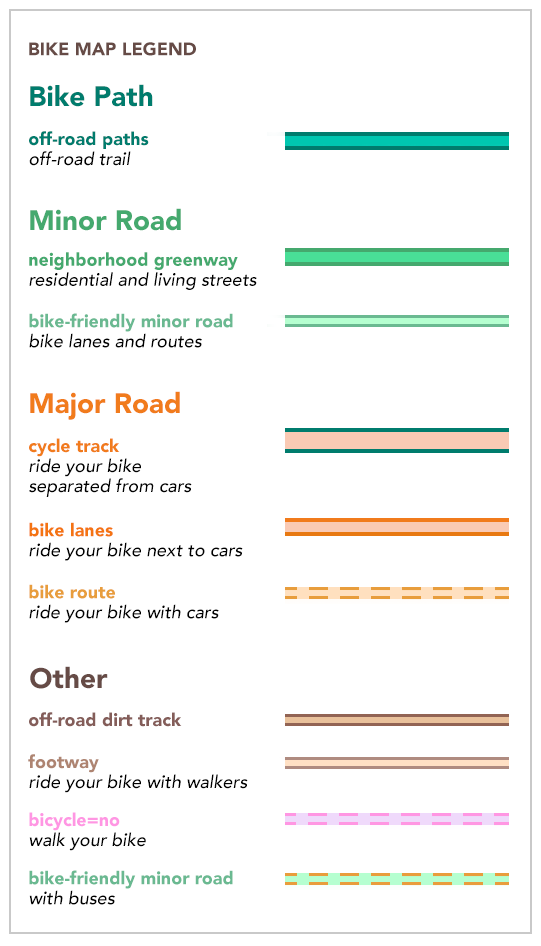
<style>
.page{position:relative;width:541px;height:946px;background:#ffffff}
.page>*{position:absolute;margin:0}
.t1{font:18px "Avenir-Black";color:#664b46;text-transform:uppercase}
.t2{font:28px "Avenir-Black";color:#007c6d}
.t3{font:18px/20px "Avenir-Black";color:#007c6d}
.t4{font:18px/20px "Avenir-MediumOblique";color:#000000}
.t5{font:28px "Avenir-Black";color:#45a96e}
.t6{font:18px/20px "Avenir-Black";color:#45a96e}
.t7{font:18px/20px "Avenir-Black";color:#6ab991}
.t8{font:28px "Avenir-Black";color:#f17b1c}
.t9{font:18px/20px "Avenir-Black";color:#f17b1c}
.t10{font:18px/20px "Avenir-Black";color:#f47412}
.t11{font:18px/20px "Avenir-Black";color:#e89d3c}
.t12{font:28px "Avenir-Black";color:#664b46}
.t13{font:18px "Avenir-Black";color:#845d59}
.t14{font:18px/20px "Avenir-Black";color:#ae8471}
.t15{font:18px/20px "Avenir-Black";color:#ff96e3}
</style>
<div class="page">
<p class="t1" style="left:29px;top:42px;width:167px;height:14px">Bike Map Legend</p>
<p class="t2" style="left:30px;top:84px;width:123px;height:23px">Bike Path</p>
<p class="t3" style="left:29px;top:131px;width:120px;height:35px">off-road paths<br><span class="t4">off-road trail</span></p>
<p class="t5" style="left:30px;top:208px;width:151px;height:23px">Minor Road</p>
<p class="t4" style="left:29px;top:252px;width:228px;height:38px"><span class="t6">neighborhood greenway<br></span>residential and living streets</p>
<p class="t7" style="left:29px;top:313px;width:204px;height:35px">bike-friendly minor road<br><span class="t4">bike lanes and routes</span></p>
<p class="t8" style="left:30px;top:391px;width:150px;height:29px">Major Road</p>
<p class="t4" style="left:29px;top:438px;width:163px;height:59px"><span class="t9">cycle track<br></span>ride your bike <br>separated from cars</p>
<p class="t4" style="left:29px;top:522px;width:214px;height:39px"><span class="t10">bike lanes<br></span>ride your bike next to cars</p>
<p class="t4" style="left:29px;top:584px;width:190px;height:39px"><span class="t11">bike route<br></span>ride your bike with cars</p>
<p class="t12" style="left:30px;top:666px;width:78px;height:23px">Other</p>
<p class="t13" style="left:29px;top:712px;width:153px;height:15px">off-road dirt track</p>
<p class="t4" style="left:28px;top:754px;width:220px;height:39px"><span class="t14">footway<br></span>ride your bike with walkers</p>
<p class="t4" style="left:29px;top:812px;width:117px;height:39px"><span class="t15">bicycle=no<br></span>walk your bike</p>
<p class="t7" style="left:29px;top:870px;width:204px;height:35px">bike-friendly minor road<br><span class="t4">with buses</span></p>
</div>
